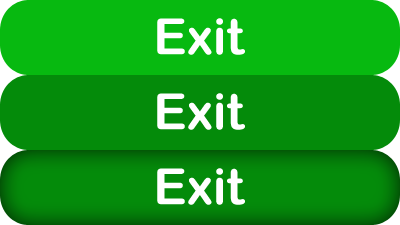
<style>
.page{position:relative;width:400px;height:225px;background:#048b0a}
.page>*{position:absolute;margin:0}
.t1{font:50px "ArialRoundedMTBold";color:#ffffff}
</style>
<div class="page">
<p class="t1" style="left:157px;top:18px;width:88px;height:37px">Exit</p>
<p class="t1" style="left:157px;top:93px;width:88px;height:37px">Exit</p>
<p class="t1" style="left:157px;top:168px;width:88px;height:37px">Exit</p>
</div>
